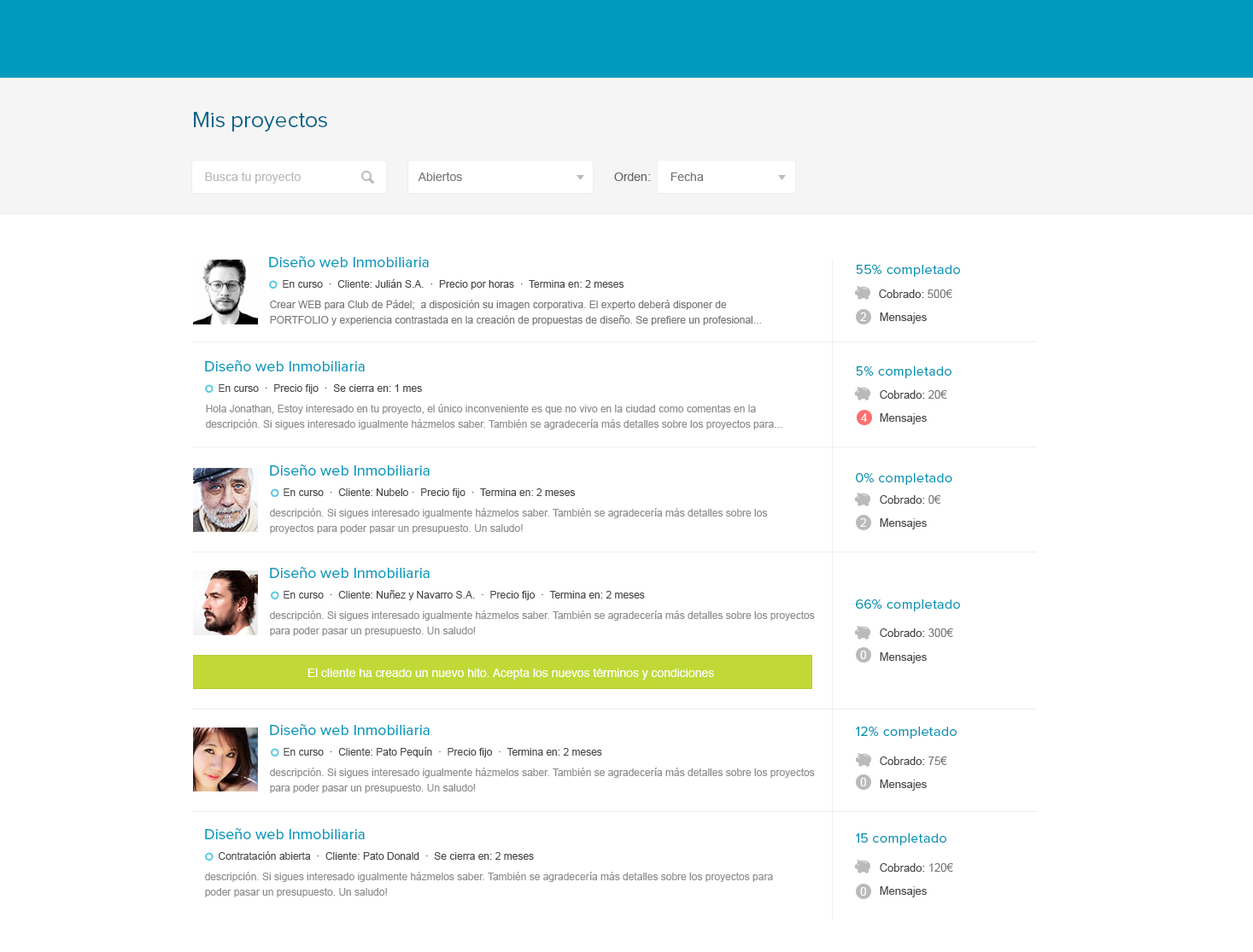
<style>
.page{position:relative;width:1253px;height:952px;background:#ffffff}
.page>*{position:absolute;margin:0}
.t1{font:22.2px "ProximaNova-Regular";color:#01648b}
.t2{font:12px "ArialMT";color:#bababa}
.t3{font:12px "ArialMT";color:#787878}
.t4{font:12px "Helvetica";color:#666666}
.t5{font:15.4px "ProximaNova-Regular";color:#009abe}
.t6{font:13.7px "ProximaNova-Regular";letter-spacing:0.025em;color:#0094b5}
.t7{font:10.2px "ArialMT";color:#484848}
.t8{font:11.1px "ArialMT";color:#484848}
.t9{font:11.1px "ArialMT";color:#787878}
.t10{font:10.2px/15.4px "ArialMT";color:#787878}
.t11{font:11.1px "ArialMT";color:#ffffff}
.t12{font:10.2px/15.4px "ArialMT";color:#8e8e8e}
.t13{font:12px "Helvetica";color:#ffffff}
</style>
<div class="page">
<p class="t1" style="left:194px;top:112px;width:133px;height:19px">Mis proyectos</p>
<p class="t2" style="left:205px;top:172px;width:96px;height:12px">Busca tu proyecto</p>
<p class="t3" style="left:418px;top:172px;width:44px;height:9px">Abiertos</p>
<p class="t4" style="left:614px;top:172px;width:37px;height:9px">Orden:</p>
<p class="t3" style="left:670px;top:172px;width:34px;height:9px">Fecha</p>
<p class="t5" style="left:269px;top:255px;width:160px;height:12px">Diseño web Inmobiliaria</p>
<p class="t6" style="left:856px;top:265px;width:104px;height:12px">55% completado</p>
<p class="t7" style="left:283px;top:279px;width:341px;height:10px">En curso  ·  Cliente: Julián S.A.  ·  Precio por horas  ·  Termina en: 2 meses</p>
<p class="t8" style="left:879px;top:289px;width:73px;height:9px">Cobrado: <span class="t9">500€</span></p>
<p class="t10" style="left:270px;top:300px;width:491px;height:25px">Crear WEB para Club de Pádel;  a disposición su imagen corporativa. El experto deberá disponer de PORTFOLIO y experiencia contrastada en la creación de propuestas de diseño. Se prefiere un profesional...</p>
<p class="t11" style="left:860px;top:312px;width:6px;height:9px">2</p>
<p class="t8" style="left:879px;top:312px;width:47px;height:12px">Mensajes</p>
<p class="t5" style="left:205px;top:359px;width:160px;height:12px">Diseño web Inmobiliaria</p>
<p class="t6" style="left:856px;top:366px;width:95px;height:12px">5% completado</p>
<p class="t7" style="left:219px;top:384px;width:203px;height:10px">En curso  ·  Precio fijo  ·  Se cierra en: 1 mes</p>
<p class="t8" style="left:879px;top:390px;width:68px;height:9px">Cobrado:<span class="t9"> 20€</span></p>
<p class="t12" style="left:206px;top:404px;width:576px;height:25px">Hola Jonathan, Estoy interesado en tu proyecto, el único inconveniente es que no vivo en la ciudad como comentas en la descripción. Si sigues interesado igualmente házmelos saber. También se agradecería más detalles sobre los proyectos para...</p>
<p class="t11" style="left:861px;top:413px;width:6px;height:9px">4</p>
<p class="t8" style="left:879px;top:413px;width:47px;height:11px">Mensajes</p>
<p class="t5" style="left:270px;top:464px;width:159px;height:12px">Diseño web Inmobiliaria</p>
<p class="t6" style="left:856px;top:473px;width:96px;height:12px">0% completado</p>
<p class="t7" style="left:283px;top:488px;width:292px;height:10px">En curso  ·  Cliente: Nubelo ·  Precio fijo  ·  Termina en: 2 meses</p>
<p class="t8" style="left:879px;top:495px;width:62px;height:9px">Cobrado:<span class="t9"> 0€</span></p>
<p class="t12" style="left:270px;top:508px;width:498px;height:26px">descripción. Si sigues interesado igualmente házmelos saber. También se agradecería más detalles sobre los proyectos para poder pasar un presupuesto. Un saludo!</p>
<p class="t11" style="left:860px;top:518px;width:6px;height:9px">2</p>
<p class="t8" style="left:879px;top:518px;width:47px;height:11px">Mensajes</p>
<p class="t5" style="left:270px;top:566px;width:159px;height:12px">Diseño web Inmobiliaria</p>
<p class="t7" style="left:283px;top:590px;width:362px;height:10px">En curso  ·  Cliente: Nuñez y Navarro S.A.  ·  Precio fijo  ·  Termina en: 2 meses</p>
<p class="t6" style="left:856px;top:599px;width:104px;height:12px">66% completado</p>
<p class="t12" style="left:270px;top:610px;width:545px;height:26px">descripción. Si sigues interesado igualmente házmelos saber. También se agradecería más detalles sobre los proyectos para poder pasar un presupuesto. Un saludo!</p>
<p class="t8" style="left:879px;top:628px;width:74px;height:9px">Cobrado:<span class="t9"> 300€</span></p>
<p class="t11" style="left:860px;top:651px;width:6px;height:8px">0</p>
<p class="t8" style="left:879px;top:652px;width:47px;height:11px">Mensajes</p>
<p class="t13" style="left:307px;top:669px;width:407px;height:11px">El cliente ha creado un nuevo hito. Acepta los nuevos términos y condiciones</p>
<p class="t5" style="left:270px;top:723px;width:159px;height:12px">Diseño web Inmobiliaria</p>
<p class="t6" style="left:856px;top:727px;width:100px;height:12px">12% completado</p>
<p class="t7" style="left:283px;top:747px;width:319px;height:10px">En curso  ·  Cliente: Pato Pequín  ·  Precio fijo  ·  Termina en: 2 meses</p>
<p class="t8" style="left:879px;top:756px;width:68px;height:9px">Cobrado:<span class="t9"> 75€</span></p>
<p class="t12" style="left:270px;top:768px;width:545px;height:25px">descripción. Si sigues interesado igualmente házmelos saber. También se agradecería más detalles sobre los proyectos para poder pasar un presupuesto. Un saludo!</p>
<p class="t11" style="left:860px;top:778px;width:6px;height:8px">0</p>
<p class="t8" style="left:879px;top:780px;width:47px;height:11px">Mensajes</p>
<p class="t5" style="left:205px;top:827px;width:160px;height:12px">Diseño web Inmobiliaria</p>
<p class="t6" style="left:856px;top:833px;width:90px;height:12px">15 completado</p>
<p class="t7" style="left:219px;top:851px;width:315px;height:9px">Contratación abierta  ·  Cliente: Pato Donald  ·  Se cierra en: 2 meses</p>
<p class="t8" style="left:879px;top:863px;width:74px;height:9px">Cobrado:<span class="t9"> 120€</span></p>
<p class="t12" style="left:205px;top:872px;width:568px;height:25px">descripción. Si sigues interesado igualmente házmelos saber. También se agradecería más detalles sobre los proyectos para poder pasar un presupuesto. Un saludo!</p>
<p class="t11" style="left:860px;top:887px;width:6px;height:9px">0</p>
<p class="t8" style="left:879px;top:886px;width:47px;height:11px">Mensajes</p>
</div>
